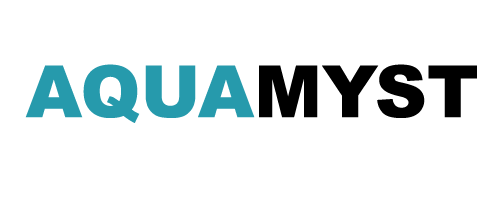
<style>
.page{position:relative;width:500px;height:200px;background:#ffffff}
.page>*{position:absolute;margin:0}
.t1{font:72px "Arial-Black";color:#269aac}
.t2{font:72px "Arial-Black";color:#000000}
</style>
<div class="page">
<p class="t1" style="left:25px;top:64px;width:452px;height:59px">AQUA<span class="t2">MYST</span></p>
</div>
